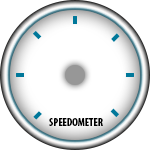
<style>
.page{position:relative;width:150px;height:150px;background:#ffffff}
.page>*{position:absolute;margin:0}
.t1{font:11px "MyriadPro-BoldCond";color:#000000}
</style>
<div class="page">
<p class="t1" style="left:49px;top:118px;width:54px;height:8px">SPEEDOMETER</p>
</div>
